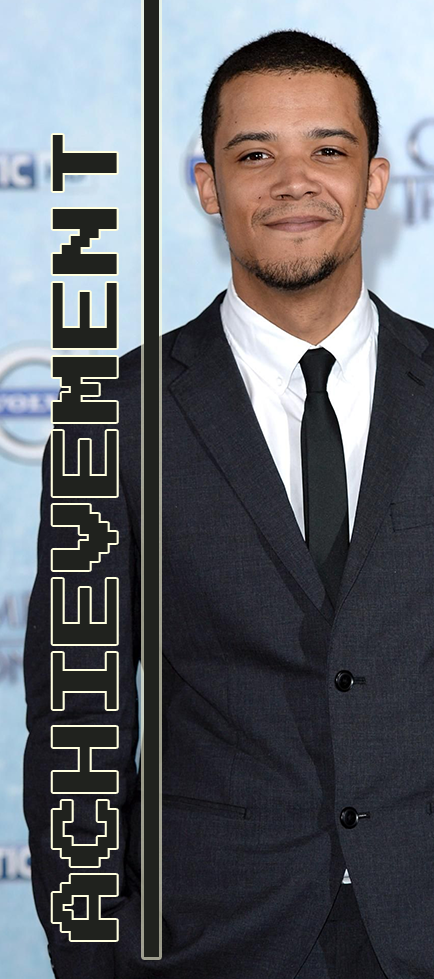
<style>
.page{position:relative;width:434px;height:979px}
.page>*{position:absolute;margin:0}
.t1{font:72px "PressStart2P-Regular";color:#20221e;font-weight:bold}
</style>
<div class="page">
<p class="t1" style="left:52px;top:135px;width:65px;height:805px;rotate:-90deg">ACHIEVEMENT</p>
</div>
